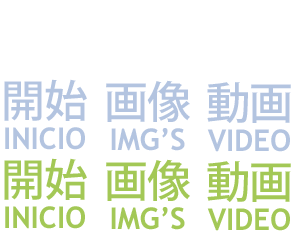
<style>
.page{position:relative;width:294px;height:231px;background:#ffffff}
.page>*{position:absolute;margin:0}
.t1{font:44px "KozGoPr6N-Medium";letter-spacing:-0.01em;color:#b3c4e0}
.t2{font:30px "TrebuchetMS-Bold";letter-spacing:-0.01em;color:#b3c4e0}
.t3{font:44px "KozGoPr6N-Medium";letter-spacing:-0.01em;color:#a3c856}
.t4{font:30px "TrebuchetMS-Bold";letter-spacing:-0.01em;color:#a3c856}
</style>
<div class="page">
<p class="t1" style="left:4px;top:79px;width:83px;height:42px">開始</p>
<p class="t1" style="left:106px;top:80px;width:84px;height:42px">画像</p>
<p class="t1" style="left:207px;top:82px;width:84px;height:41px">動画</p>
<p class="t2" style="left:5px;top:127px;width:80px;height:23px">INICIO</p>
<p class="t2" style="left:111px;top:128px;width:74px;height:23px">IMG’S</p>
<p class="t2" style="left:207px;top:129px;width:83px;height:23px">VIDEO</p>
<p class="t3" style="left:4px;top:158px;width:83px;height:42px">開始</p>
<p class="t3" style="left:106px;top:159px;width:84px;height:42px">画像</p>
<p class="t3" style="left:207px;top:161px;width:84px;height:41px">動画</p>
<p class="t4" style="left:5px;top:206px;width:80px;height:23px">INICIO</p>
<p class="t4" style="left:111px;top:207px;width:74px;height:23px">IMG’S</p>
<p class="t4" style="left:207px;top:208px;width:83px;height:23px">VIDEO</p>
</div>
